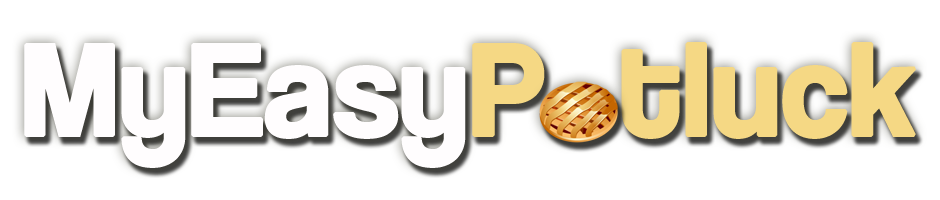
<style>
.page{position:relative;width:940px;height:200px;background:#ffffff}
.page>*{position:absolute;margin:0}
.t1{font:135px "CoolveticaRg-Regular";color:#f5d884;font-weight:bold}
.t2{font:135px "CoolveticaRg-Regular";color:#fffdfe;font-weight:bold}
</style>
<div class="page">
<p class="t1" style="left:24px;top:42px;width:892px;height:126px"><span class="t2">MyEasy</span>P  tluck</p>
</div>
